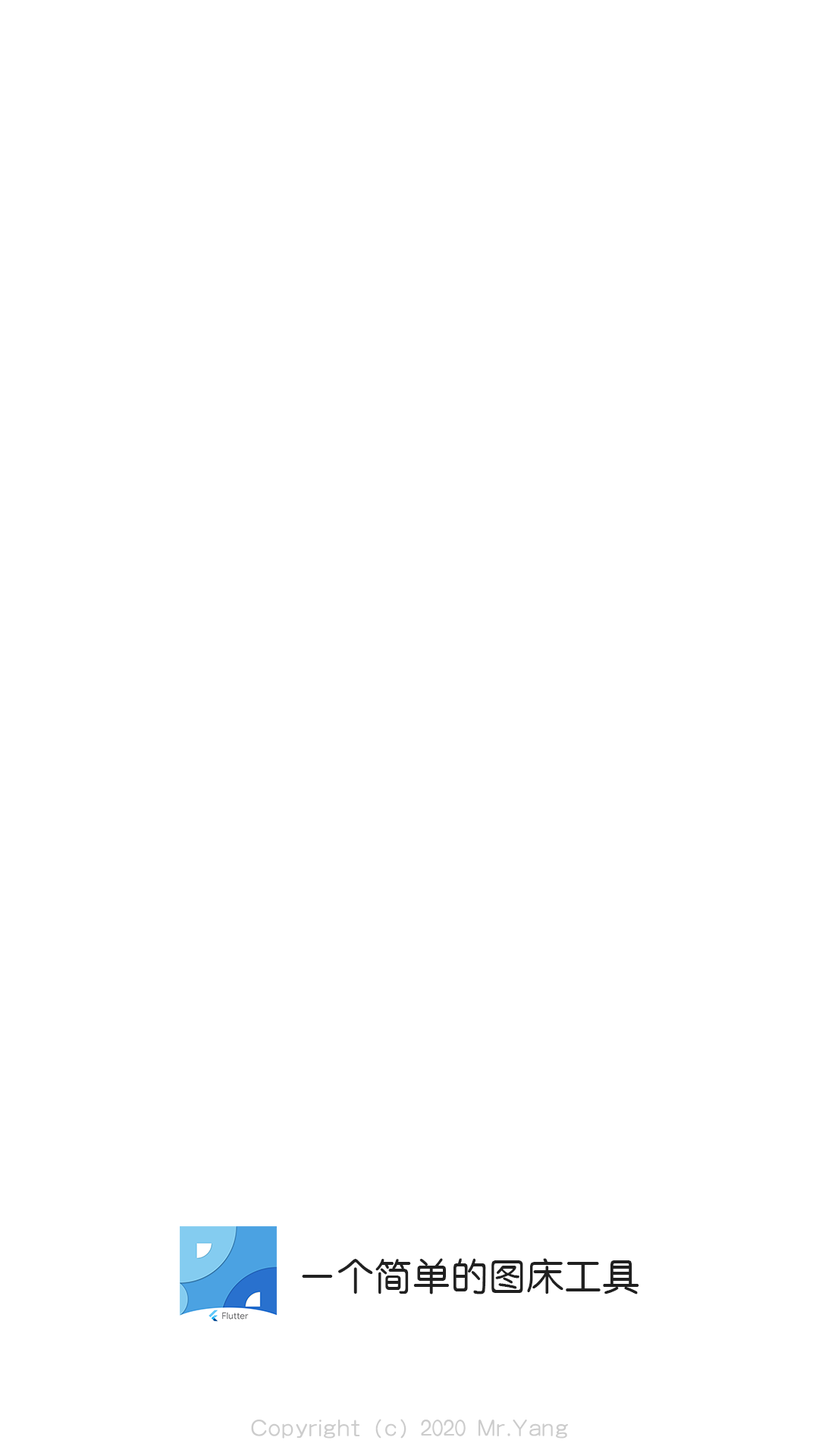
<style>
.page{position:relative;width:819px;height:1456px;background:#ffffff}
.page>*{position:absolute;margin:0}
.t1{font:37.9px "ç»å¸ä¸­åç®-regular";color:#202020}
.t2{font:22.7px "ç»å¸ä¸­åç®-regular";color:#cccccc}
</style>
<div class="page">
<p class="t1" style="left:302px;top:1258px;width:337px;height:36px">一个简单的图床工具</p>
<p class="t2" style="left:251px;top:1419px;width:317px;height:20px">Copyright (c) 2020 Mr.Yang</p>
</div>
